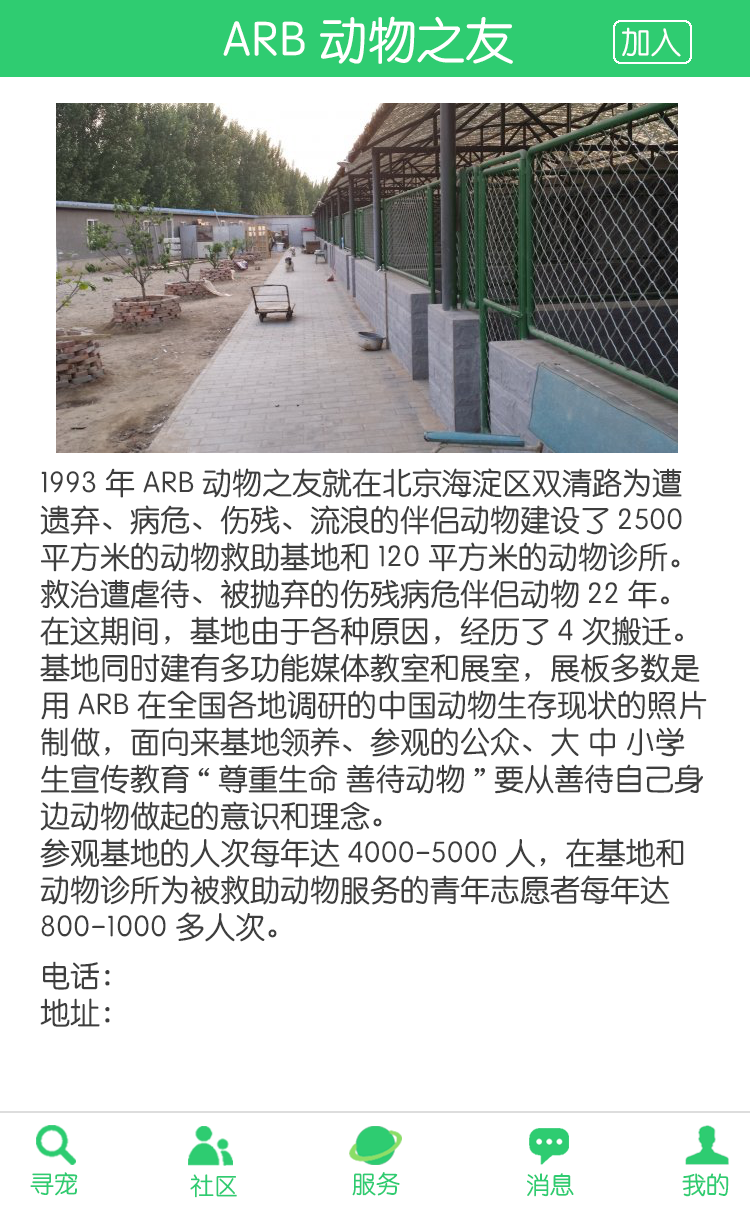
<style>
.page{position:relative;width:750px;height:1206px;background:#ffffff}
.page>*{position:absolute;margin:0}
.t1{font:48.7px "STYuanti-SC-Regular";color:#ffffff}
.t2{font:30px "STYuanti-SC-Regular";color:#ffffff}
.t3{font:30px/37px "STYuanti-SC-Regular";color:#3e3e3e}
.t4{font:24px "STYuanti-SC-Regular";color:#2ecc71}
.t5{font:24px "STYuanti-SC-Regular"}
</style>
<div class="page">
<p class="t1" style="left:223px;top:16px;width:290px;height:48px">ARB动物之友</p>
<p class="t1" style="left:223px;top:16px;width:290px;height:48px">ARB动物之友</p>
<p class="t2" style="left:622px;top:27px;width:59px;height:30px">加入</p>
<p class="t3" style="left:40px;top:468px;width:667px;height:474px">1993年ARB动物之友就在北京海淀区双清路为遭遗弃、病危、伤残、流浪的伴侣动物建设了2500平方米的动物救助基地和120平方米的动物诊所。救治遭虐待、被抛弃的伤残病危伴侣动物22年。在这期间，基地由于各种原因，经历了4次搬迁。<br>基地同时建有多功能媒体教室和展室，展板多数是用ARB在全国各地调研的中国动物生存现状的照片制做，面向来基地领养、参观的公众、大 中 小学生宣传教育“尊重生命 善待动物”要从善待自己身边动物做起的意识和理念。<br>参观基地的人次每年达4000-5000人，在基地和动物诊所为被救助动物服务的青年志愿者每年达800-1000多人次。</p>
<p class="t3" style="left:40px;top:961px;width:70px;height:66px">电话：<br>地址：</p>
<p class="t4" style="left:30px;top:1172px;width:48px;height:24px">寻宠</p>
<p class="t4" style="left:30px;top:1172px;width:48px;height:24px">寻宠</p>
<p class="t4" style="left:190px;top:1174px;width:47px;height:24px">社区</p>
<p class="t4" style="left:190px;top:1174px;width:47px;height:24px">社区</p>
<p class="t5" style="left:352px;top:1173px;width:48px;height:24px">服务</p>
<p class="t4" style="left:352px;top:1172px;width:48px;height:24px">服务</p>
<p class="t5" style="left:352px;top:1173px;width:48px;height:24px">服务</p>
<p class="t4" style="left:352px;top:1172px;width:48px;height:24px">服务</p>
<p class="t5" style="left:526px;top:1173px;width:47px;height:24px">消息</p>
<p class="t5" style="left:526px;top:1173px;width:47px;height:24px">消息</p>
<p class="t4" style="left:527px;top:1173px;width:47px;height:24px">消息</p>
<p class="t4" style="left:527px;top:1173px;width:47px;height:24px">消息</p>
<p class="t4" style="left:682px;top:1173px;width:47px;height:24px">我的</p>
<p class="t4" style="left:682px;top:1173px;width:47px;height:24px">我的</p>
<p class="t4" style="left:682px;top:1173px;width:47px;height:24px">我的</p>
<p class="t4" style="left:682px;top:1173px;width:47px;height:24px">我的</p>
</div>
